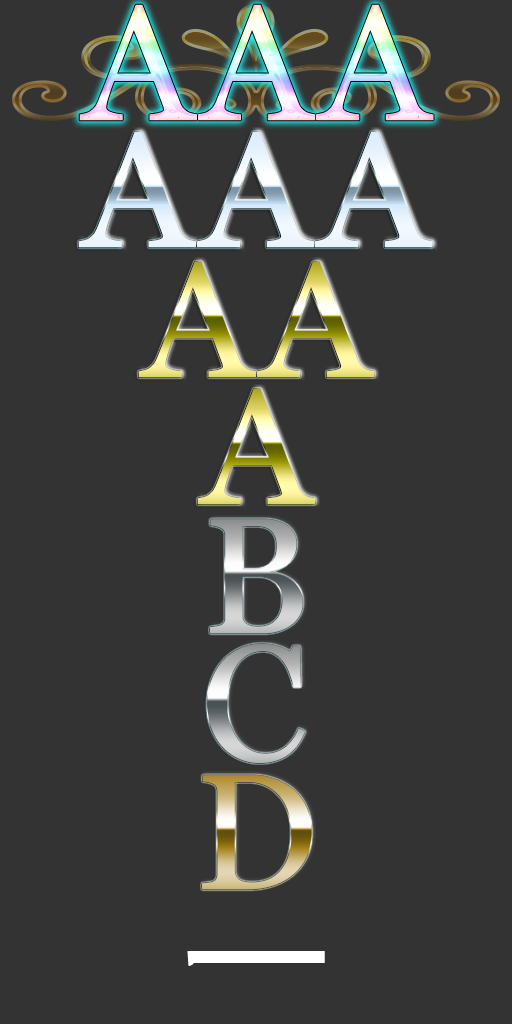
<style>
.page{position:relative;width:512px;height:1024px;background:#333333}
.page>*{position:absolute;margin:0}
.t1{font:164px "Vani";letter-spacing:0.05em;color:#ffffff}
.t2{font:164px "Vani";letter-spacing:0.05em}
.t3{font:164px "KozGoPr6N-Regular";letter-spacing:0.05em;color:#ffffff}
</style>
<div class="page">
<p class="t1" style="left:78px;top:131px;width:355px;height:117px">AAA</p>
<p class="t2" style="left:138px;top:261px;width:237px;height:117px">AA</p>
<p class="t2" style="left:197px;top:388px;width:118px;height:117px">A</p>
<p class="t2" style="left:210px;top:519px;width:93px;height:115px">B</p>
<p class="t2" style="left:207px;top:644px;width:98px;height:119px">C</p>
<p class="t2" style="left:202px;top:775px;width:110px;height:115px">D</p>
<p class="t3" style="left:187px;top:951px;width:138px;height:15px">ー</p>
</div>
